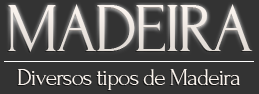
<style>
.page{position:relative;width:259px;height:94px;background:#333333}
.page>*{position:absolute;margin:0}
.t1{font:70px "Forum";letter-spacing:-0.05em;color:#faf3ed;text-transform:uppercase}
.t2{font:24px "Forum";letter-spacing:-0.05em;color:#faf3ed}
</style>
<div class="page">
<p class="t1" style="left:8px;top:5px;width:245px;height:48px;opacity:0.6">Madeira</p>
<p class="t1" style="left:8px;top:4px;width:245px;height:48px">Madeira</p>
<p class="t2" style="left:18px;top:69px;width:222px;height:21px">Diversos tipos de Madeira</p>
</div>
